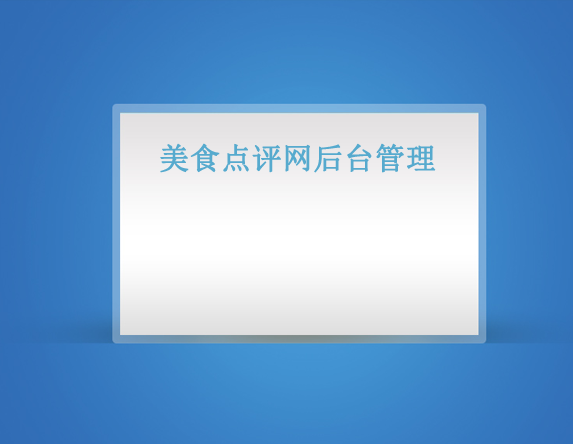
<style>
.page{position:relative;width:573px;height:444px}
.page>*{position:absolute;margin:0}
.t1{font:30px "SimSun";color:#56aace;font-weight:bold}
</style>
<div class="page">
<p class="t1" style="left:160px;top:143px;width:276px;height:30px">美食点评网后台管理</p>
</div>
